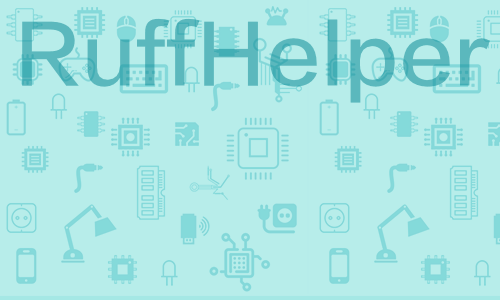
<style>
.page{position:relative;width:500px;height:300px;background:#b7edea}
.page>*{position:absolute;margin:0}
.t1{font:80px "FZLTZHK--GBK1-0";letter-spacing:0.025em;color:#5bb8bd}
</style>
<div class="page">
<p class="t1" style="left:22px;top:18px;width:468px;height:85px">RuffHelper</p>
</div>
